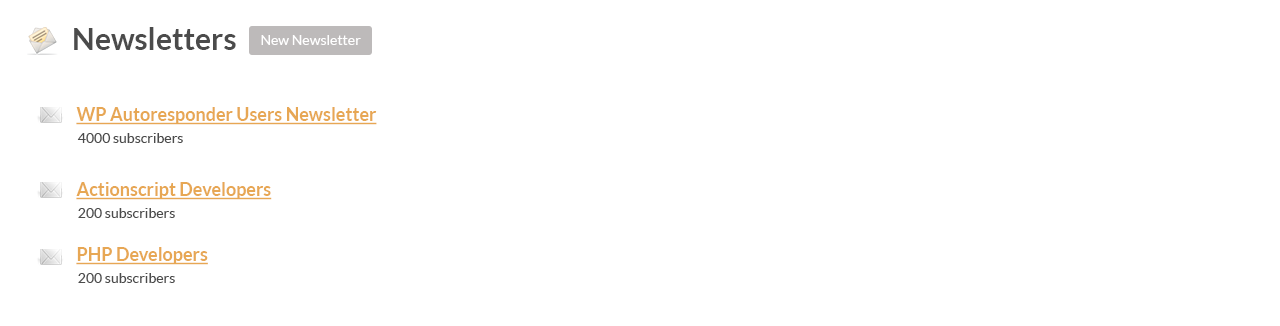
<style>
.page{position:relative;width:1280px;height:326px;background:#ffffff}
.page>*{position:absolute;margin:0}
.t1{font:30px "Lato-Bold";color:#4b4b4b}
.t2{font:14px "Lato-Regular";color:#ffffff}
.t3{font:18px "Lato-Bold";color:#e7a754;text-decoration:underline}
.t4{font:14px "Lato-Regular";color:#4b4b4b}
</style>
<div class="page">
<p class="t1" style="left:74px;top:27px;width:162px;height:23px">Newsletters</p>
<p class="t2" style="left:261px;top:35px;width:100px;height:10px">New Newsletter</p>
<p class="t3" style="left:76px;top:107px;width:301px;height:18px">WP Autoresponder Users Newsletter</p>
<p class="t4" style="left:77px;top:133px;width:106px;height:10px">4000 subscribers</p>
<p class="t3" style="left:76px;top:182px;width:196px;height:18px">Actionscript Developers</p>
<p class="t4" style="left:78px;top:208px;width:97px;height:10px">200 subscribers</p>
<p class="t3" style="left:76px;top:247px;width:132px;height:18px">PHP Developers</p>
<p class="t4" style="left:78px;top:273px;width:97px;height:10px">200 subscribers</p>
</div>
